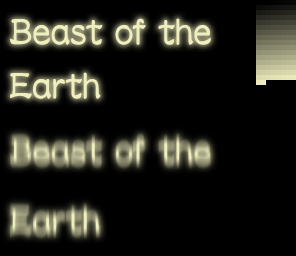
<style>
.page{position:relative;width:296px;height:256px;background:#000000}
.page>*{position:absolute;margin:0}
.t1{font:48.4px/54px "DFLeiShoStd-W5";letter-spacing:-0.025em;color:#efeebe;scale:0.82 1}
</style>
<div class="page">
<p class="t1" style="left:10px;top:18px;width:201px;height:81px">Beast of the<br>Earth</p>
</div>
